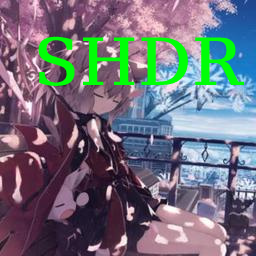
<style>
.page{position:relative;width:256px;height:256px}
.page>*{position:absolute;margin:0}
.t1{font:65px "DejaVuSerif";color:#00ff07;font-weight:bold}
</style>
<div class="page">
<p class="t1" style="left:38px;top:36px;width:206px;height:50px">SHDR</p>
</div>
